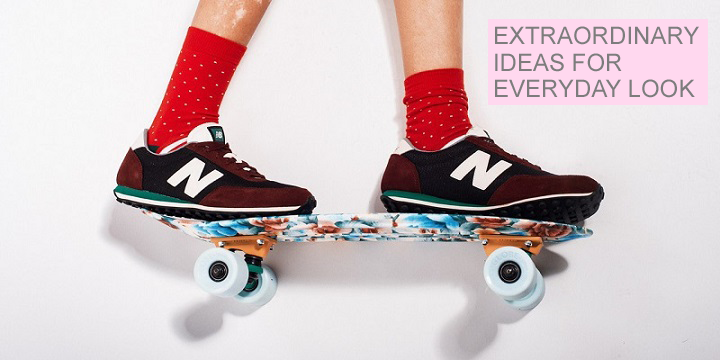
<style>
.page{position:relative;width:720px;height:360px}
.page>*{position:absolute;margin:0}
.t1{font:24px/26.7px "ArialMT";color:#7d7c7c;text-transform:uppercase}
</style>
<div class="page">
<p class="t1" style="left:495px;top:26px;width:204px;height:72px">extraordinary ideas for everyday look</p>
</div>
